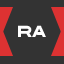
<style>
.page{position:relative;width:64px;height:64px;background:#333333}
.page>*{position:absolute;margin:0}
.t1{font:16px "WidockTRIAL-Bold";color:#ffffff}
</style>
<div class="page">
<p class="t1" style="left:18px;top:25px;width:28px;height:12px">RA</p>
</div>
